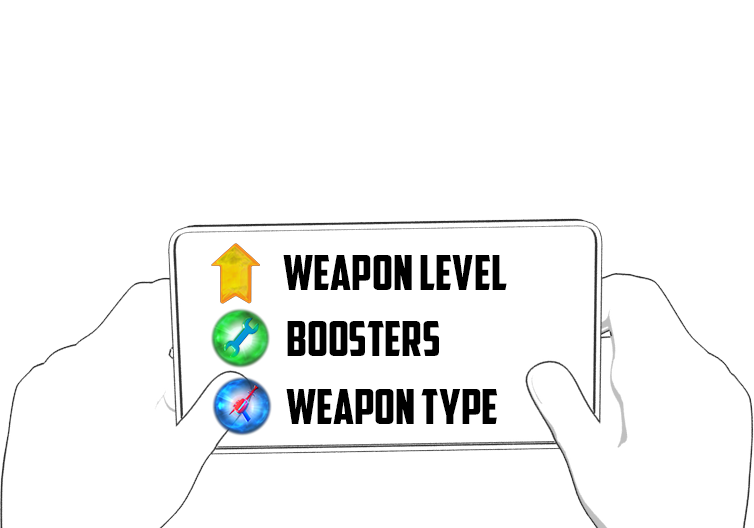
<style>
.page{position:relative;width:754px;height:528px;background:#ffffff}
.page>*{position:absolute;margin:0}
.t1{font:48px "AmericanCaptain";color:#000000}
</style>
<div class="page">
<p class="t1" style="left:283px;top:255px;width:224px;height:35px">WEAPON LEVEL</p>
<p class="t1" style="left:287px;top:321px;width:152px;height:35px">BOOSTERS</p>
<p class="t1" style="left:286px;top:389px;width:212px;height:35px">WEAPON TYPE</p>
</div>
